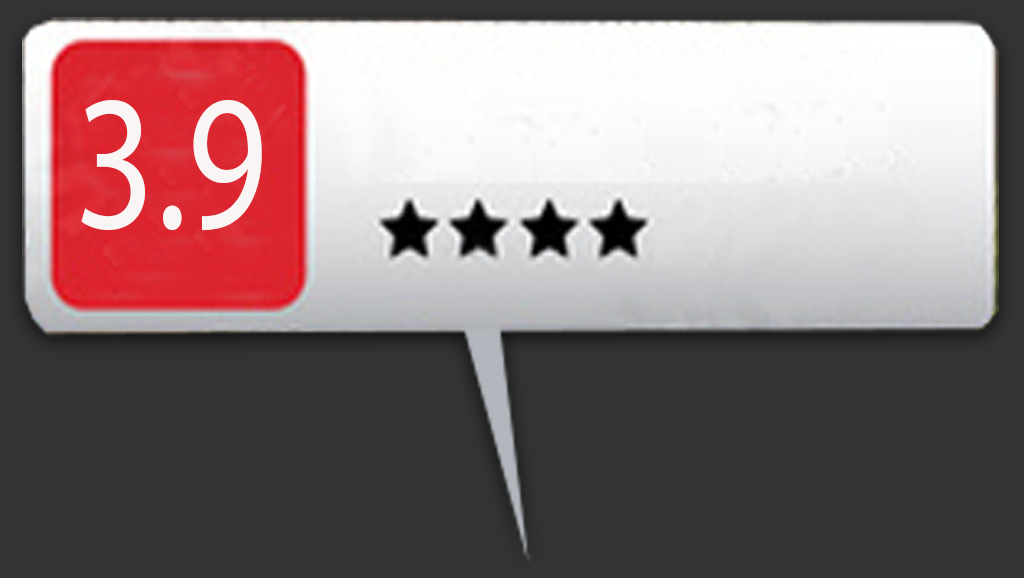
<style>
.page{position:relative;width:1024px;height:578px;background:#333333}
.page>*{position:absolute;margin:0}
.t1{font:193.8px "MyriadPro-Regular";color:#f9f5f5;scale:0.81 1}
</style>
<div class="page">
<p class="t1" style="left:81px;top:100px;width:181px;height:131px">3.9</p>
</div>
